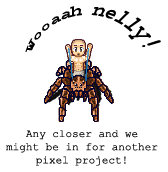
<style>
.page{position:relative;width:168px;height:172px;background:#ffffff}
.page>*{position:absolute;margin:0}
.t1{font:11px "CourierNewPSMT";color:#000000}
</style>
<div class="page">
<p class="t1" style="left:25px;top:6px;width:136px;height:46px;text-align:right">Wooaah nelly!</p>
<p class="t1" style="left:6px;top:130px;width:152px;height:36px;text-align:center">Any closer and we<br>might be in for another<br>pixel project!</p>
</div>
